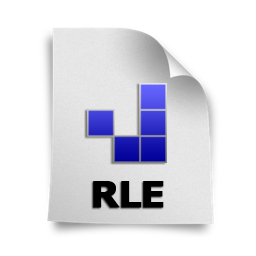
<style>
.page{position:relative;width:256px;height:256px;background:#ffffff}
.page>*{position:absolute;margin:0}
.t1{font:36px "Verdana-Bold";letter-spacing:-0.05em;color:#000000;font-weight:bold}
</style>
<div class="page">
<p class="t1" style="left:93px;top:181px;width:71px;height:27px">RLE</p>
</div>
